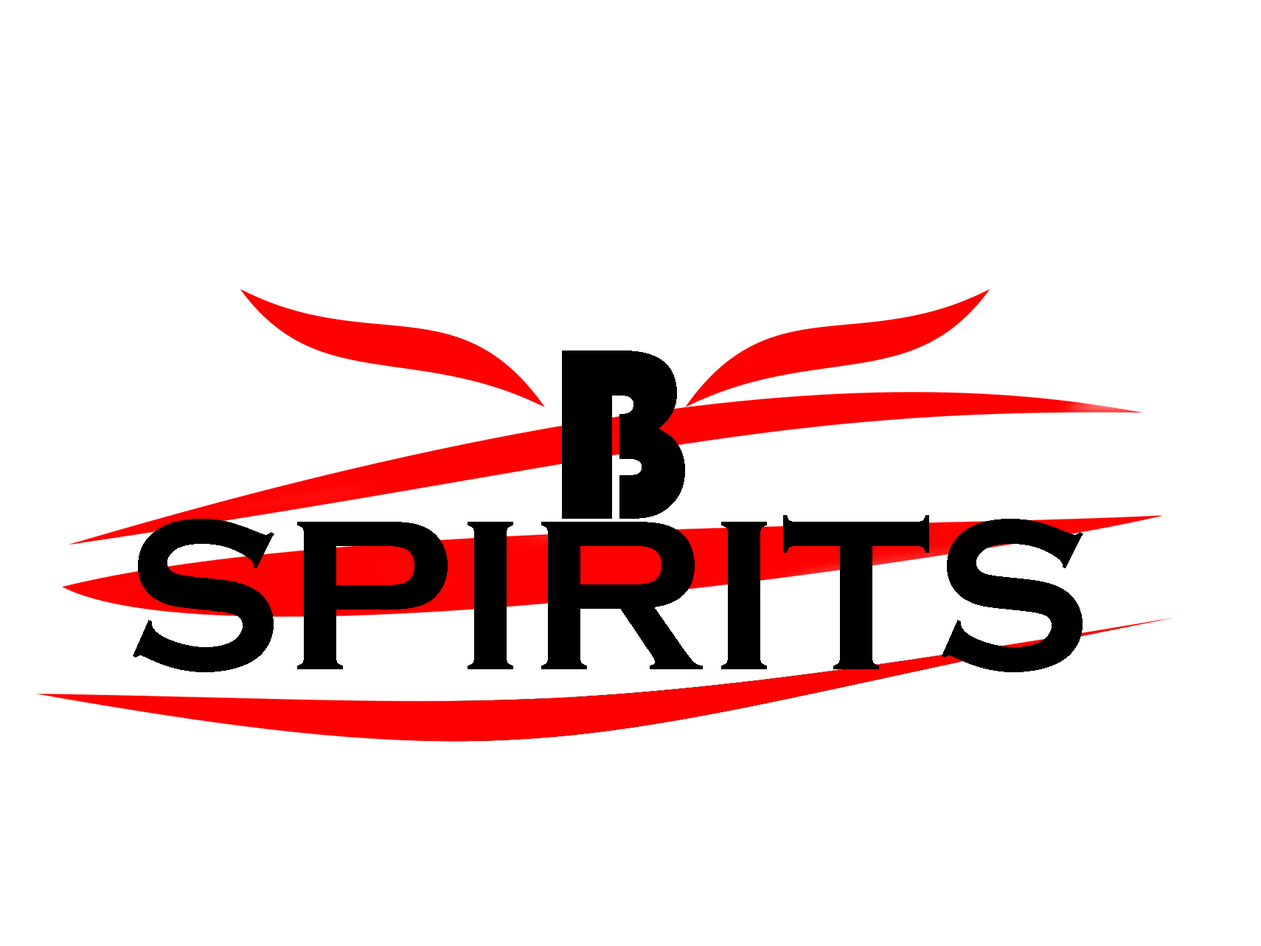
<style>
.page{position:relative;width:1261px;height:946px;background:#ffffff}
.page>*{position:absolute;margin:0}
.t1{font:252px "Bauhaus93";letter-spacing:0.005em;color:#010101;text-transform:uppercase}
.t2{font:221.3px "CopperplateGothic-Bold";letter-spacing:0.005em;color:#000000;text-transform:uppercase}
</style>
<div class="page">
<p class="t1" style="left:562px;top:350px;width:123px;height:168px">B</p>
<p class="t2" style="left:133px;top:515px;width:950px;height:157px">SPIRITS</p>
</div>
